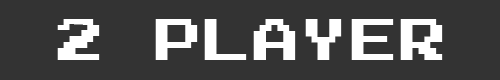
<style>
.page{position:relative;width:500px;height:80px;background:#333333}
.page>*{position:absolute;margin:0}
.t1{font:59.2px "JoystixMonospace-Regular";color:#ffffff}
</style>
<div class="page">
<p class="t1" style="left:57px;top:19px;width:386px;height:41px">2 PLAYER</p>
</div>
